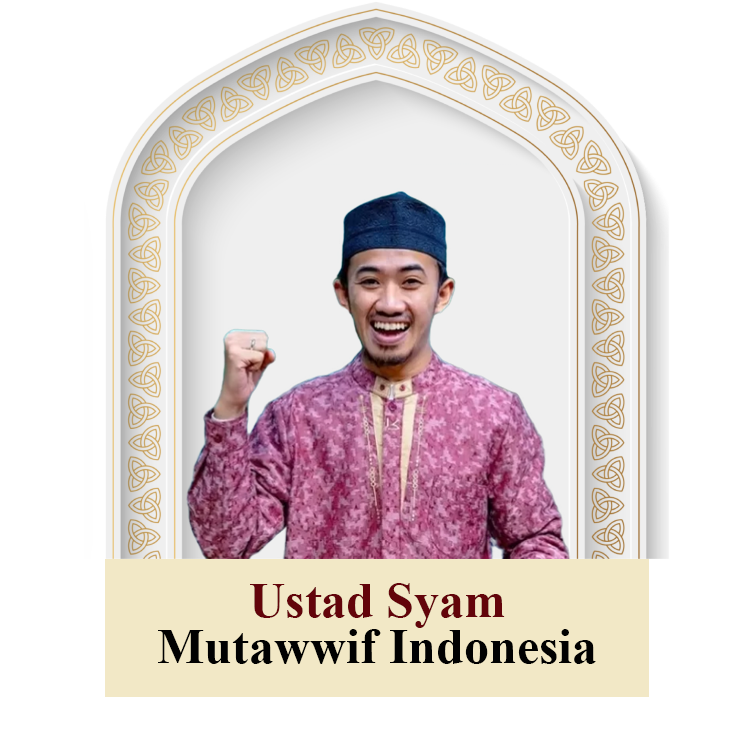
<style>
.page{position:relative;width:750px;height:750px;background:#ffffff}
.page>*{position:absolute;margin:0}
.t1{font:12px "TimesNewRomanPS-BoldMT";color:#63040a}
.t2{font:12px "TimesNewRomanPS-BoldMT";color:#010101}
</style>
<div class="page">
<p class="t1" style="left:250px;top:583px;width:255px;height:45px">Ustad Syam</p>
<p class="t2" style="left:158px;top:629px;width:438px;height:35px">Mutawwif Indonesia</p>
</div>
